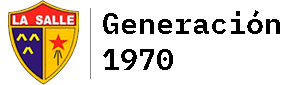
<style>
.page{position:relative;width:282px;height:85px;background:#ffffff}
.page>*{position:absolute;margin:0}
.t1{font:30px "IBMPlexMono-SemiBold";color:#000000}
</style>
<div class="page">
<p class="t1" style="left:103px;top:10px;width:177px;height:60px">Generación <br>1970</p>
</div>
